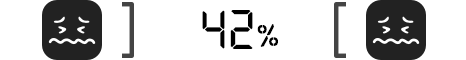
<style>
.page{position:relative;width:466px;height:60px;background:#ffffff}
.page>*{position:absolute;margin:0}
.t1{font:50px "LABDigital";letter-spacing:0.05em;color:#000000}
.t2{font:30px "LABDigital";letter-spacing:0.12em;color:#000000}
</style>
<div class="page">
<p class="t1" style="left:202px;top:10px;width:76px;height:39px">42<span class="t2">%</span></p>
</div>
